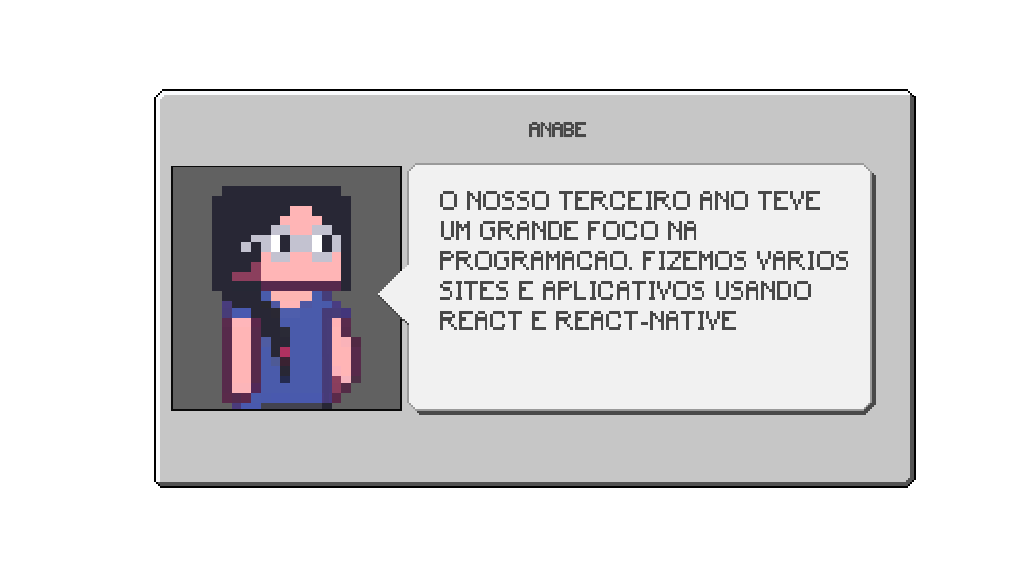
<style>
.page{position:relative;width:1024px;height:576px;background:#ffffff}
.page>*{position:absolute;margin:0}
.t1{font:19.6px "Minecraft";letter-spacing:0.02em;color:#494949;text-transform:uppercase;scale:0.86 1}
.t2{font:25.2px/30px "Minecraft";letter-spacing:0.05em;color:#494949;text-transform:uppercase;scale:0.86 1}
</style>
<div class="page">
<p class="t1" style="left:530px;top:122px;width:57px;height:16px">Anabe</p>
<p class="t2" style="left:440px;top:191px;width:408px;height:139px">o nosso terceiro ano teve<br>um grande foco na<br>programacao. fizemos varios<br>sites e aplicativos usando<br>react e react-native</p>
</div>
